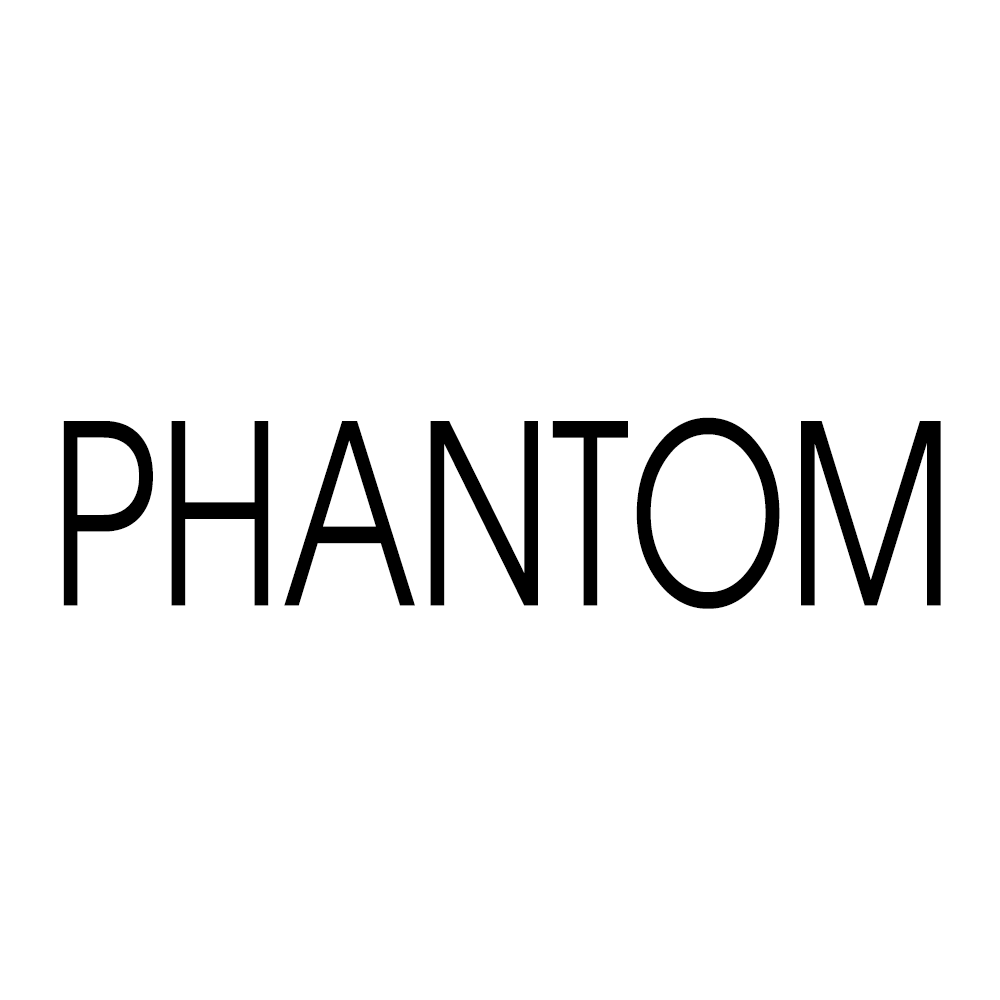
<style>
.page{position:relative;width:1000px;height:1000px;background:#ffffff}
.page>*{position:absolute;margin:0}
.t1{font:249.2px "AvantGarde-Book";color:#000000;scale:0.73 1}
</style>
<div class="page">
<p class="t1" style="left:63px;top:417px;width:878px;height:192px">PHANTOM</p>
</div>
